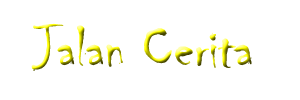
<style>
.page{position:relative;width:300px;height:100px;background:#ffffff}
.page>*{position:absolute;margin:0}
.t1{font:60px "Chiller-Regular"}
</style>
<div class="page">
<p class="t1" style="left:31px;top:23px;width:221px;height:48px">Jalan Cerita</p>
</div>
